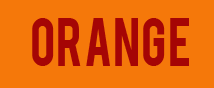
<style>
.page{position:relative;width:214px;height:88px;background:#f5780a}
.page>*{position:absolute;margin:0}
.t1{font:53.6px "Bebas";color:#a50505;scale:0.91 1}
</style>
<div class="page">
<p class="t1" style="left:32px;top:18px;width:157px;height:48px">orange</p>
</div>
